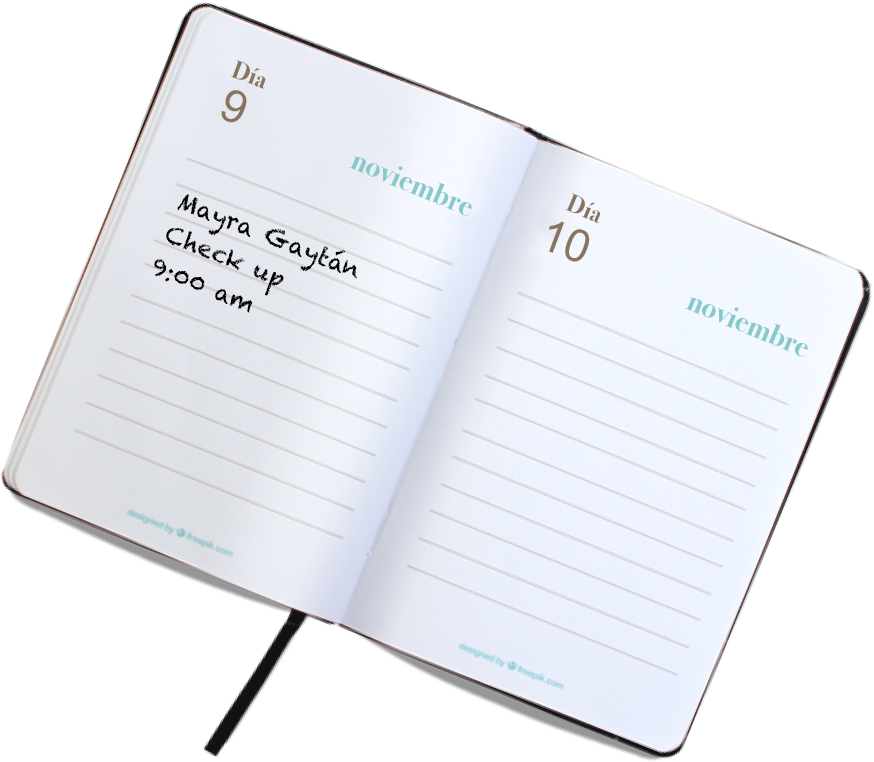
<style>
.page{position:relative;width:874px;height:762px;background:#ffffff}
.page>*{position:absolute;margin:0}
.t1{font:25px "BodoniSvtyTwoOSITCTT-Bold";color:#8b745d}
.t2{font:45px "ArialMT";color:#8b745d}
.t3{font:29.8px "BodoniSvtyTwoOSITCTT-Bold";color:#88c9cb}
.t4{font:24px/35.7px "Chalkduster";color:#000000}
</style>
<div class="page">
<p class="t1" style="left:230px;top:60px;width:36px;height:29px;rotate:20deg">Día</p>
<p class="t2" style="left:221px;top:90px;width:26px;height:33px;rotate:20deg">9</p>
<p class="t3" style="left:349px;top:156px;width:123px;height:60px;rotate:23deg">noviembre</p>
<p class="t4" style="left:154px;top:194px;width:203px;height:119px;rotate:22deg">Mayra Gaytán<br>Check up<br>9:00 am</p>
<p class="t1" style="left:565px;top:193px;width:35px;height:30px;rotate:23deg">Día</p>
<p class="t2" style="left:548px;top:221px;width:42px;height:41px;rotate:20deg">10</p>
<p class="t3" style="left:685px;top:297px;width:123px;height:60px;rotate:23deg">noviembre</p>
</div>
